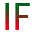
<style>
.page{position:relative;width:32px;height:32px;background:#ffffff}
.page>*{position:absolute;margin:0}
.t1{font:36px "LucidaGrande"}
</style>
<div class="page">
<p class="t1" style="left:5px;top:3px;width:25px;height:27px">IF</p>
</div>
